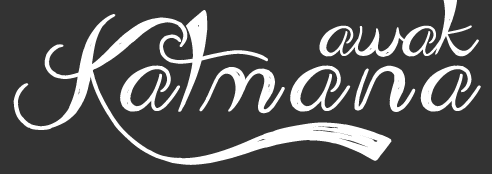
<style>
.page{position:relative;width:492px;height:174px;background:#333333}
.page>*{position:absolute;margin:0}
.t1{font:90px "AdmirationPains";letter-spacing:0.1em;color:#ffffff;font-weight:bold}
</style>
<div class="page">
<p class="t1" style="left:13px;top:10px;width:468px;height:155px">Katmana</p>
</div>
